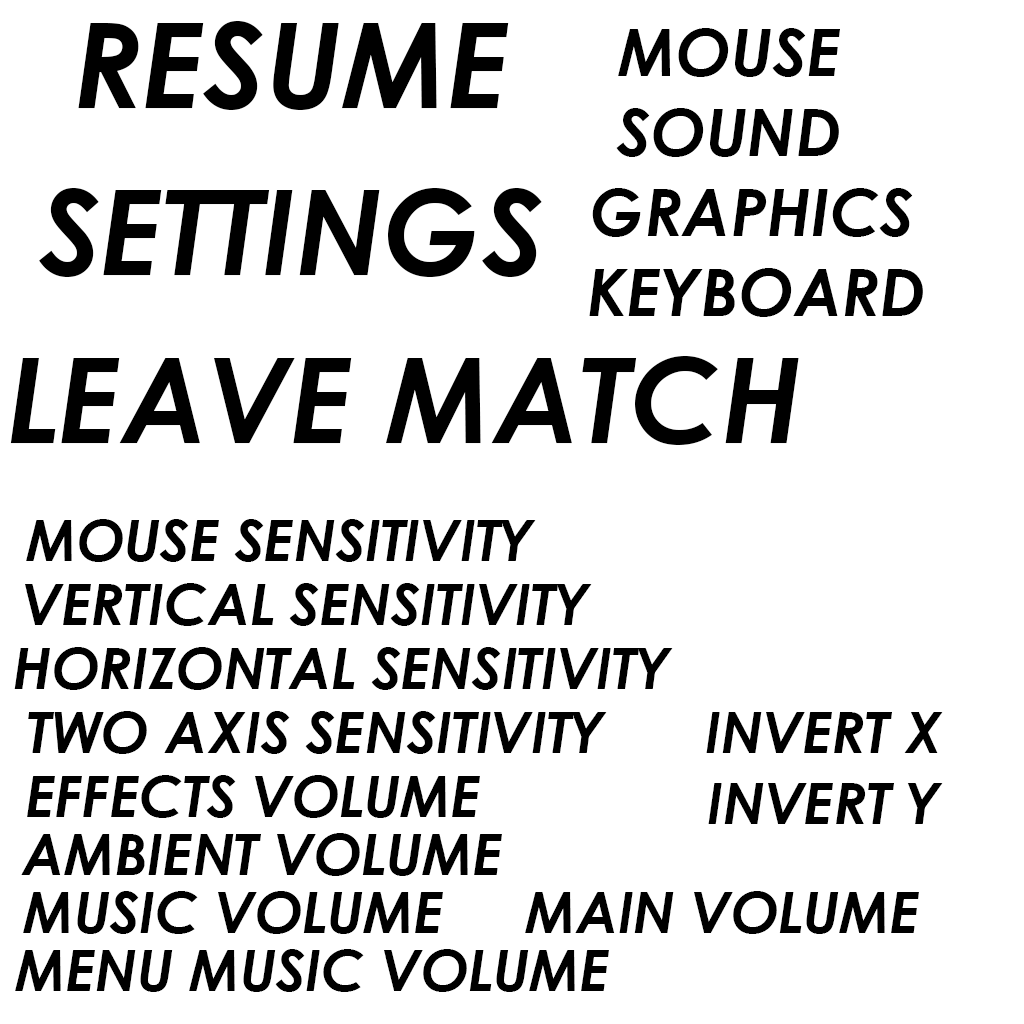
<style>
.page{position:relative;width:1024px;height:1024px;background:#ffffff}
.page>*{position:absolute;margin:0}
.t1{font:118.4px "CenturyGothic-BoldItalic";color:#000000}
.t2{font:65.2px "CenturyGothic-BoldItalic";color:#000000}
.t3{font:56.5px "CenturyGothic-BoldItalic";color:#000000}
</style>
<div class="page">
<p class="t1" style="left:78px;top:21px;width:431px;height:89px">RESUME</p>
<p class="t2" style="left:618px;top:28px;width:222px;height:49px">MOUSE</p>
<p class="t2" style="left:616px;top:108px;width:223px;height:49px">SOUND</p>
<p class="t1" style="left:39px;top:188px;width:503px;height:89px">SETTINGS</p>
<p class="t2" style="left:592px;top:188px;width:321px;height:49px">GRAPHICS</p>
<p class="t2" style="left:589px;top:268px;width:334px;height:49px">KEYBOARD</p>
<p class="t1" style="left:10px;top:356px;width:789px;height:89px">LEAVE MATCH</p>
<p class="t3" style="left:26px;top:519px;width:510px;height:43px">MOUSE SENSITIVITY</p>
<p class="t3" style="left:25px;top:583px;width:567px;height:43px">VERTICAL SENSITIVITY</p>
<p class="t3" style="left:14px;top:647px;width:659px;height:43px">HORIZONTAL SENSITIVITY</p>
<p class="t3" style="left:28px;top:711px;width:579px;height:43px">TWO AXIS SENSITIVITY</p>
<p class="t3" style="left:706px;top:712px;width:237px;height:41px">INVERT X</p>
<p class="t3" style="left:27px;top:775px;width:453px;height:43px">EFFECTS VOLUME</p>
<p class="t3" style="left:708px;top:783px;width:235px;height:41px">INVERT Y</p>
<p class="t3" style="left:21px;top:833px;width:481px;height:43px">AMBIENT VOLUME</p>
<p class="t3" style="left:23px;top:891px;width:420px;height:43px">MUSIC VOLUME</p>
<p class="t3" style="left:525px;top:891px;width:394px;height:43px">MAIN VOLUME</p>
<p class="t3" style="left:15px;top:949px;width:594px;height:43px">MENU MUSIC VOLUME</p>
</div>
